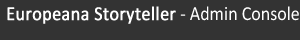
<style>
.page{position:relative;width:300px;height:40px;background:#333333}
.page>*{position:absolute;margin:0}
.t1{font:20px "Calibri";color:#ffffff;font-weight:bold;scale:0.9 1}
.t2{font:20px "Calibri";color:#ffffff;scale:0.9 1}
</style>
<div class="page">
<p class="t1" style="left:7px;top:6px;width:292px;height:18px">Europeana Storyteller<span class="t2"> - Admin Console</span></p>
</div>
